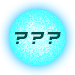
<style>
.page{position:relative;width:75px;height:75px}
.page>*{position:absolute;margin:0}
.t1{font:16.7px "UnitedKingdom";letter-spacing:0.13em;color:#004f4f;font-style:italic}
</style>
<div class="page">
<p class="t1" style="left:14px;top:32px;width:47px;height:12px">???</p>
</div>
